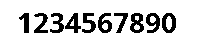
<style>
.page{position:relative;width:200px;height:48px;background:#ffffff}
.page>*{position:absolute;margin:0}
.t1{font:28px "OpenSans-Bold";color:#000000}
</style>
<div class="page">
<p class="t1" style="left:19px;top:13px;width:157px;height:20px">1234567890</p>
</div>
